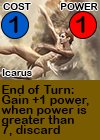
<style>
.page{position:relative;width:100px;height:140px;background:#795b01}
.page>*{position:absolute;margin:0}
.t1{font:9.7px "ArialRoundedMTBold";letter-spacing:0.01em;color:#000000}
.t2{font:24px "ArialRoundedMTBold";letter-spacing:0.01em;color:#000000}
.t3{font:24px "ArialRoundedMTBold";letter-spacing:-0.1em;color:#000000}
.t4{font:12px/10px "ArialRoundedMTBold";letter-spacing:0.01em;color:#000000}
</style>
<div class="page">
<p class="t1" style="left:3px;top:3px;width:28px;height:7px">COST</p>
<p class="t1" style="left:60px;top:3px;width:38px;height:7px">POWER</p>
<p class="t2" style="left:9px;top:16px;width:9px;height:17px">1</p>
<p class="t3" style="left:76px;top:16px;width:9px;height:17px">1</p>
<p class="t1" style="left:2px;top:69px;width:30px;height:7px">Icarus</p>
<p class="t4" style="left:1px;top:85px;width:88px;height:51px">End of Turn:<br>Gain +1 power,<br>when power is <br>greater than<br>7, discard</p>
</div>
